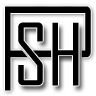
<style>
.page{position:relative;width:96px;height:96px;background:#000000}
.page>*{position:absolute;margin:0}
.t1{font:82px "AgencyFB-Reg";color:#000000}
</style>
<div class="page">
<p class="t1" style="left:18px;top:22px;width:25px;height:64px">S</p>
<p class="t1" style="left:52px;top:22px;width:27px;height:64px">H</p>
</div>
